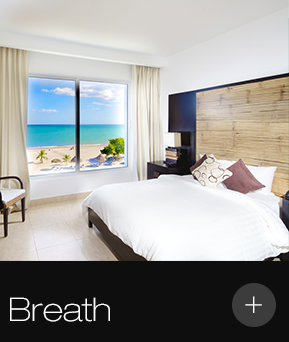
<style>
.page{position:relative;width:289px;height:342px;background:#0e0e0e}
.page>*{position:absolute;margin:0}
.t1{font:32.5px "HelveticaNeueLTPro-ThEx";color:#ffffff}
</style>
<div class="page">
<p class="t1" style="left:10px;top:297px;width:100px;height:25px">Breath</p>
<p class="t1" style="left:245px;top:296px;width:17px;height:17px">+</p>
</div>
